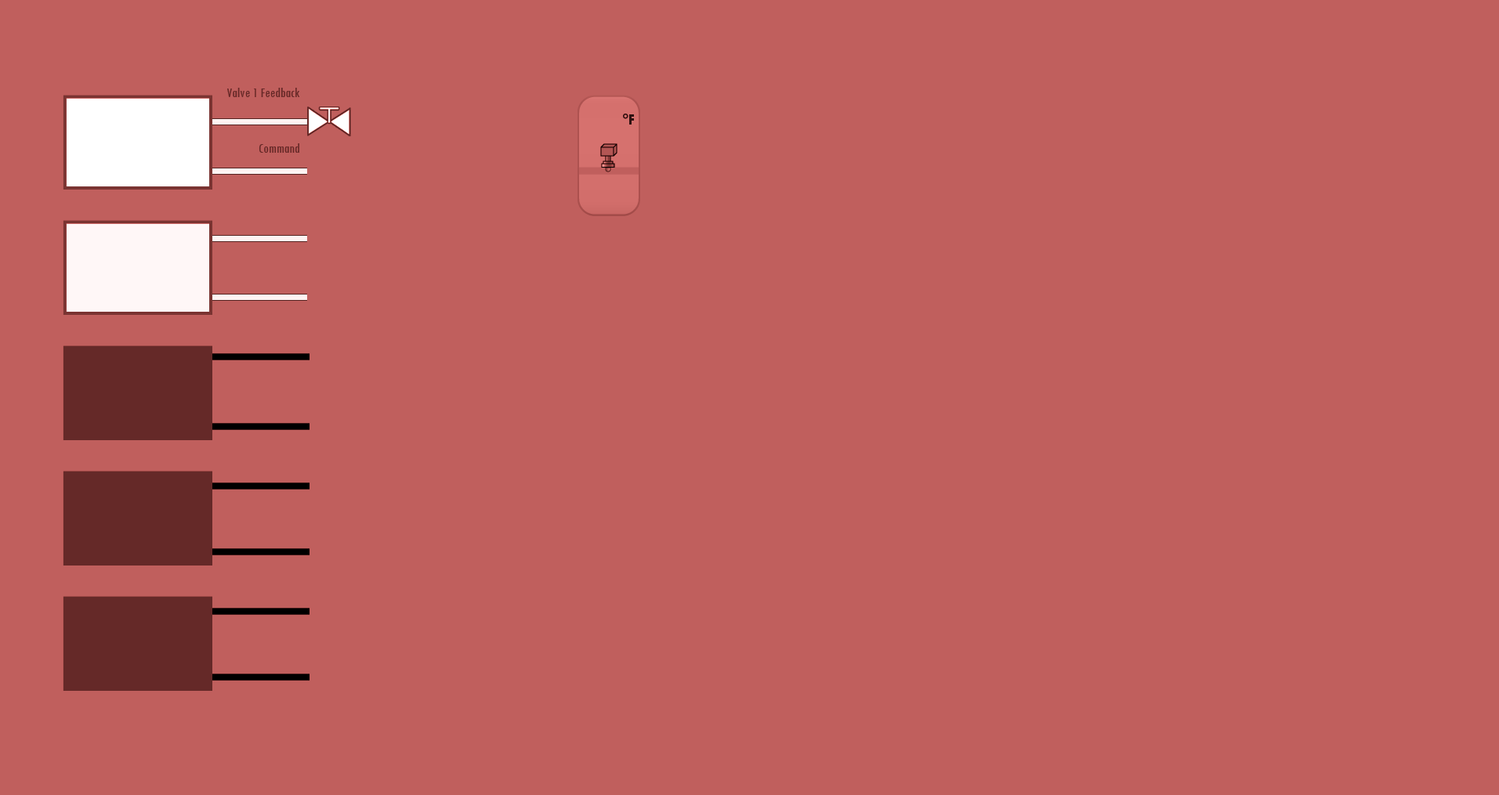
<style>
.page{position:relative;width:1499px;height:795px;background:#c05f5d}
.page>*{position:absolute;margin:0}
.t1{font:14.1px/18.5px "TwCenMT-Condensed";color:#652928}
</style>
<div class="page">
<p class="t1" style="left:227px;top:88px;width:73px;height:65px;text-align:right">Valve 1 Feedback<br><br><br>Command</p>
</div>
